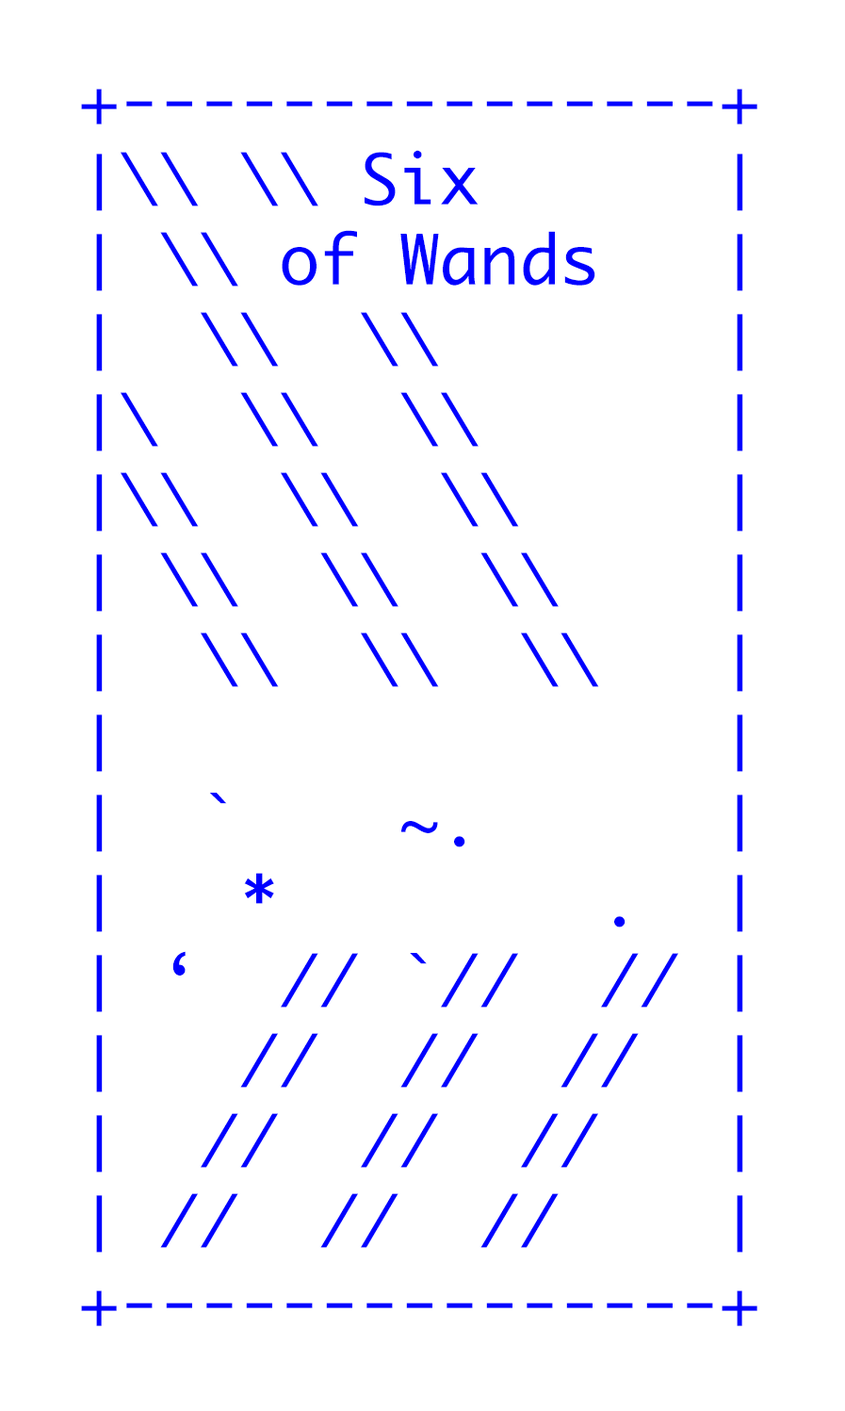
<style>
.page{position:relative;width:845px;height:1411px;background:#ffffff}
.page>*{position:absolute;margin:0}
.t1{font:66.7px "Monaco";color:#0000ff}
</style>
<div class="page">
<p class="t1" style="left:81px;top:89px;width:677px;height:1237px">+---------------+<br>│\\ \\ Six      │<br>│ \\ of Wands   │<br>│  \\  \\       │<br>│\  \\  \\      │<br>│\\  \\  \\     │<br>│ \\  \\  \\    │<br>│  \\  \\  \\   │ <br>│               │ <br>│  `    ~.      │<br>│   *        .  │ <br>│ ‘  // `//  // │ <br>│   //  //  //  │<br>│  //  //  //   │<br>│ //  //  //    │<br>+---------------+</p>
</div>
